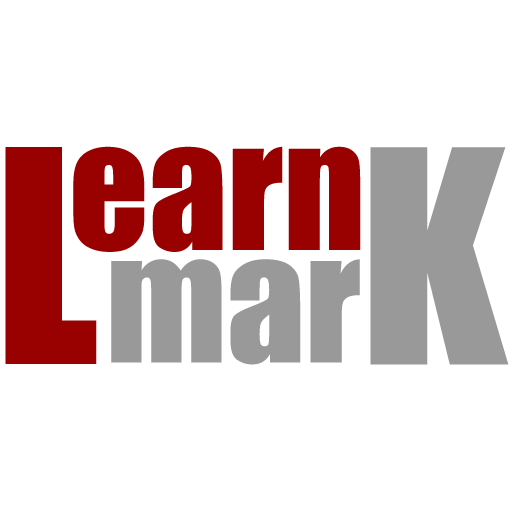
<style>
.page{position:relative;width:512px;height:512px;background:#ffffff}
.page>*{position:absolute;margin:0}
.t1{font:274.4px "Impact";color:#990000}
.t2{font:156.2px "Impact";color:#990000}
.t3{font:274.4px "Impact";color:#999999}
.t4{font:156.2px "Impact";color:#999999}
</style>
<div class="page">
<p class="t1" style="left:5px;top:147px;width:92px;height:217px">L</p>
<p class="t2" style="left:73px;top:146px;width:288px;height:106px">earn</p>
<p class="t3" style="left:370px;top:147px;width:139px;height:218px">K</p>
<p class="t4" style="left:111px;top:259px;width:249px;height:106px">mar</p>
</div>
